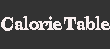
<style>
.page{position:relative;width:110px;height:49px;background:#333333}
.page>*{position:absolute;margin:0}
.t1{font:18.8px "LatinWide";color:#f8efef;scale:0.51 1}
</style>
<div class="page">
<p class="t1" style="left:1px;top:16px;width:109px;height:15px">Calorie Table</p>
</div>
